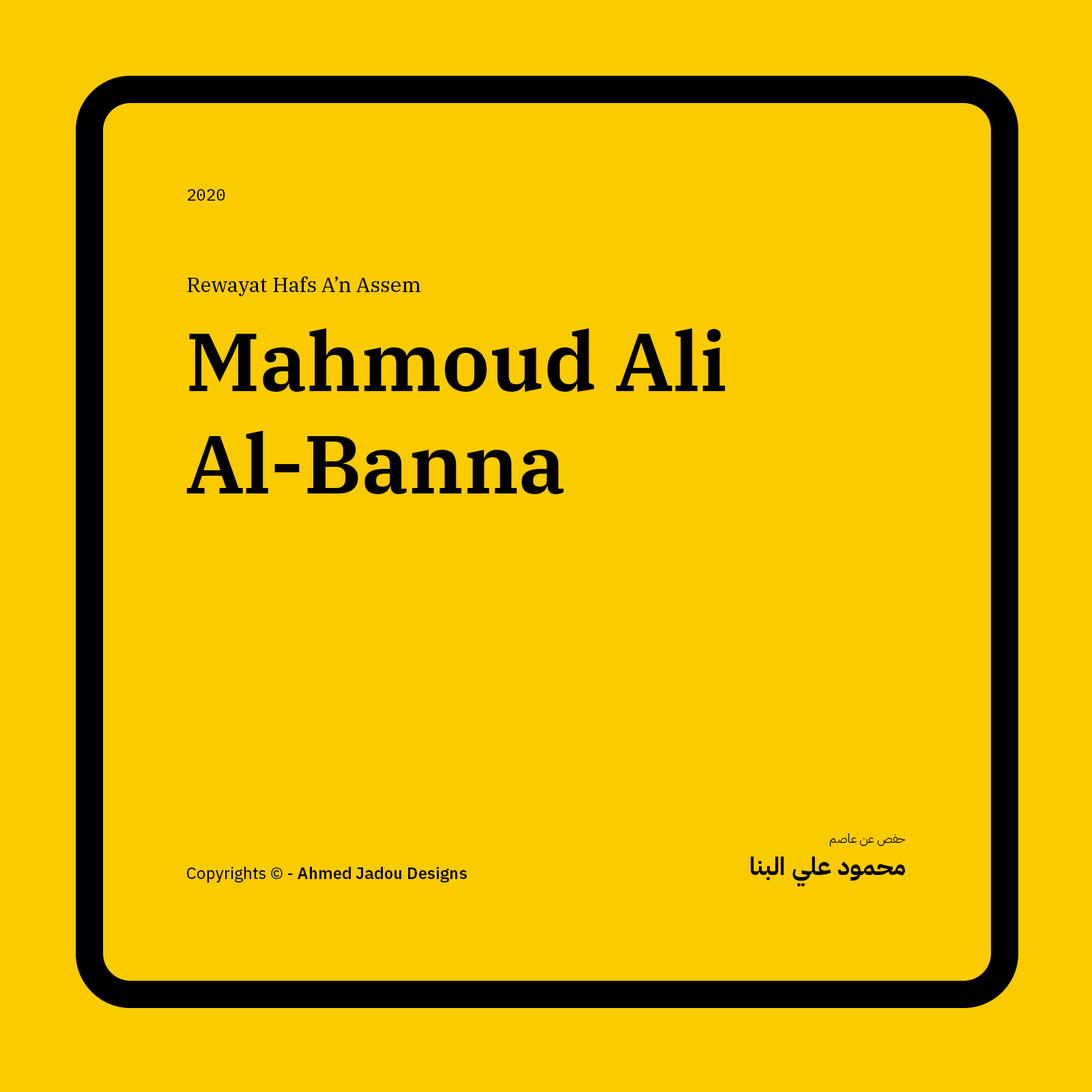
<style>
.page{position:relative;width:1092px;height:1092px;background:#facb00}
.page>*{position:absolute;margin:0}
.t1{font:16.4px "IBMPlexMono-Text";color:#000000}
.t2{font:20.5px "IBMPlexSerif-Text";color:#000000}
.t3{font:81.9px/102.7px "IBMPlexSerif-SemiBold";color:#000000}
.t4{font:12.3px "IBMPlexArabic-Light";color:#000000}
.t5{font:24.6px "IBMPlexArabic-Bold";color:#000000}
.t6{font:16.4px "IBMPlexSans-SemiBold";color:#000000}
.t7{font:16.4px "IBMPlexSans-Text";color:#000000}
</style>
<div class="page">
<p class="t1" style="left:188px;top:189px;width:37px;height:12px">2020</p>
<p class="t2" style="left:187px;top:276px;width:233px;height:20px">Rewayat Hafs A’n Assem</p>
<p class="t3" style="left:186px;top:328px;width:539px;height:166px">Mahmoud Ali  Al-Banna</p>
<p class="t4" style="left:830px;top:833px;width:76px;height:14px">حفص عن عاصم</p>
<p class="t5" style="left:751px;top:857px;width:154px;height:30px">محمود علي البنا</p>
<p class="t6" style="left:187px;top:867px;width:280px;height:15px"><span class="t7">Copyrights © - </span>Ahmed Jadou Designs</p>
</div>
